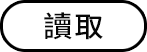
<style>
.page{position:relative;width:147px;height:52px;background:#ffffff}
.page>*{position:absolute;margin:0}
.t1{font:29.2px "NotoSansCJKtc-Medium";letter-spacing:0.06em;color:#060606}
</style>
<div class="page">
<p class="t1" style="left:44px;top:12px;width:59px;height:28px">讀取</p>
</div>
